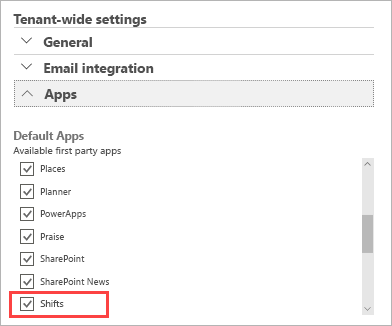
<style>
.page{position:relative;width:392px;height:326px;background:#ffffff}
.page>*{position:absolute;margin:0}
.t1{font:13.7px "SegoeUI-Bold";color:#505050}
.t2{font:11.5px "SegoeUI-Bold";color:#757575}
.t3{font:10px "SegoeUI";color:#505050}
.t4{font:9.3px "SegoeUI";color:#505050}
.t5{font:9.7px "SegoeUI";color:#505050}
</style>
<div class="page">
<p class="t1" style="left:13px;top:14px;width:134px;height:13px">Tenant-wide settings</p>
<p class="t1" style="left:43px;top:37px;width:49px;height:10px">General</p>
<p class="t1" style="left:44px;top:63px;width:110px;height:13px">Email integration</p>
<p class="t1" style="left:44px;top:89px;width:33px;height:13px">Apps</p>
<p class="t2" style="left:14px;top:131px;width:70px;height:12px">Default Apps</p>
<p class="t3" style="left:13px;top:147px;width:108px;height:9px">Available first party apps</p>
<p class="t4" style="left:40px;top:165px;width:25px;height:7px">Places</p>
<p class="t4" style="left:40px;top:188px;width:31px;height:7px">Planner</p>
<p class="t4" style="left:40px;top:210px;width:46px;height:9px">PowerApps</p>
<p class="t4" style="left:40px;top:233px;width:24px;height:7px">Praise</p>
<p class="t4" style="left:40px;top:255px;width:45px;height:7px">SharePoint</p>
<p class="t4" style="left:40px;top:278px;width:69px;height:7px">SharePoint News</p>
<p class="t5" style="left:40px;top:300px;width:24px;height:7px">Shifts</p>
</div>
